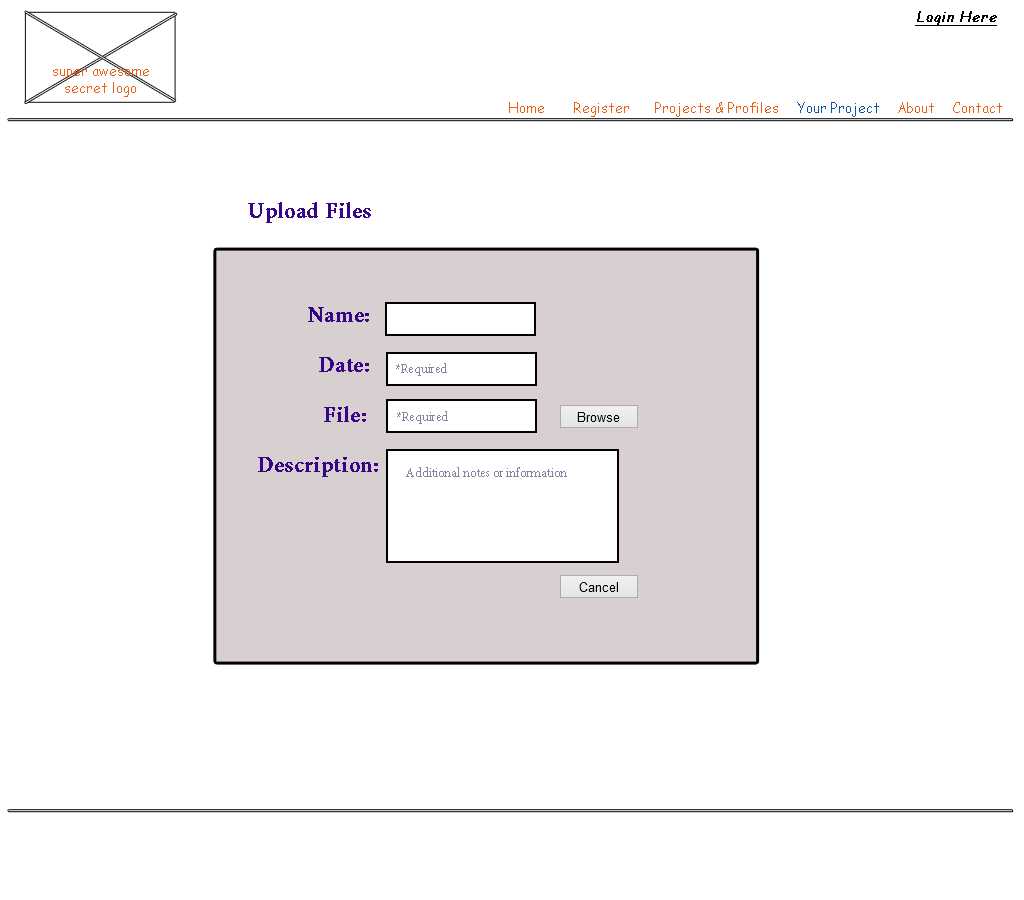
<style>
.page{position:relative;width:1024px;height:900px;background:#ffffff}
.page>*{position:absolute;margin:0}
.t1{font:14px "ComicSansMS";color:#000000;font-weight:bold;font-style:italic;text-decoration:underline}
.t2{font:14px "ComicSansMS";color:#ef5f13}
.t3{font:14px "ComicSansMS";color:#0c56a2}
.t4{font:24px "AdobeDevanagari-Bold";color:#390587;font-weight:bold}
.t5{font:14px "AdobeDevanagari-Bold";color:#8d80a0;font-weight:bold}
</style>
<div class="page">
<p class="t1" style="left:915px;top:11px;width:82px;height:15px">Login Here</p>
<p class="t2" style="left:53px;top:69px;width:96px;height:28px;text-align:center">super awesome<br>secret logo</p>
<p class="t2" style="left:509px;top:102px;width:35px;height:11px">Home</p>
<p class="t2" style="left:574px;top:102px;width:55px;height:15px">Register</p>
<p class="t2" style="left:655px;top:102px;width:123px;height:15px">Projects &amp; Profiles</p>
<p class="t3" style="left:797px;top:102px;width:82px;height:15px">Your Project</p>
<p class="t2" style="left:898px;top:102px;width:36px;height:11px">About</p>
<p class="t2" style="left:953px;top:102px;width:49px;height:11px">Contact</p>
<p class="t4" style="left:248px;top:202px;width:123px;height:21px">Upload Files</p>
<p class="t4" style="left:308px;top:307px;width:61px;height:15px">Name:</p>
<p class="t4" style="left:319px;top:357px;width:50px;height:15px">Date:</p>
<p class="t5" style="left:396px;top:363px;width:51px;height:13px">*Required</p>
<p class="t4" style="left:324px;top:406px;width:42px;height:16px">File:</p>
<p class="t5" style="left:397px;top:411px;width:51px;height:13px">*Required</p>
<p class="t4" style="left:258px;top:457px;width:120px;height:20px">Description:</p>
<p class="t5" style="left:406px;top:467px;width:161px;height:10px">Additional notes or information</p>
</div>
